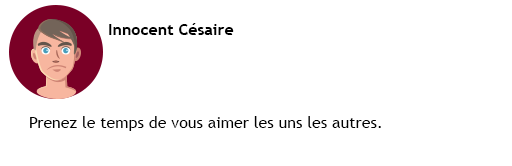
<style>
.page{position:relative;width:512px;height:166px;background:#ffffff}
.page>*{position:absolute;margin:0}
.t1{font:16px "TrebuchetMS-Bold";color:#000000}
.t2{font:16px "TrebuchetMS";color:#000000}
</style>
<div class="page">
<p class="t1" style="left:109px;top:23px;width:125px;height:12px">Innocent Césaire</p>
<p class="t2" style="left:30px;top:116px;width:351px;height:15px">Prenez le temps de vous aimer les uns les autres.</p>
</div>
